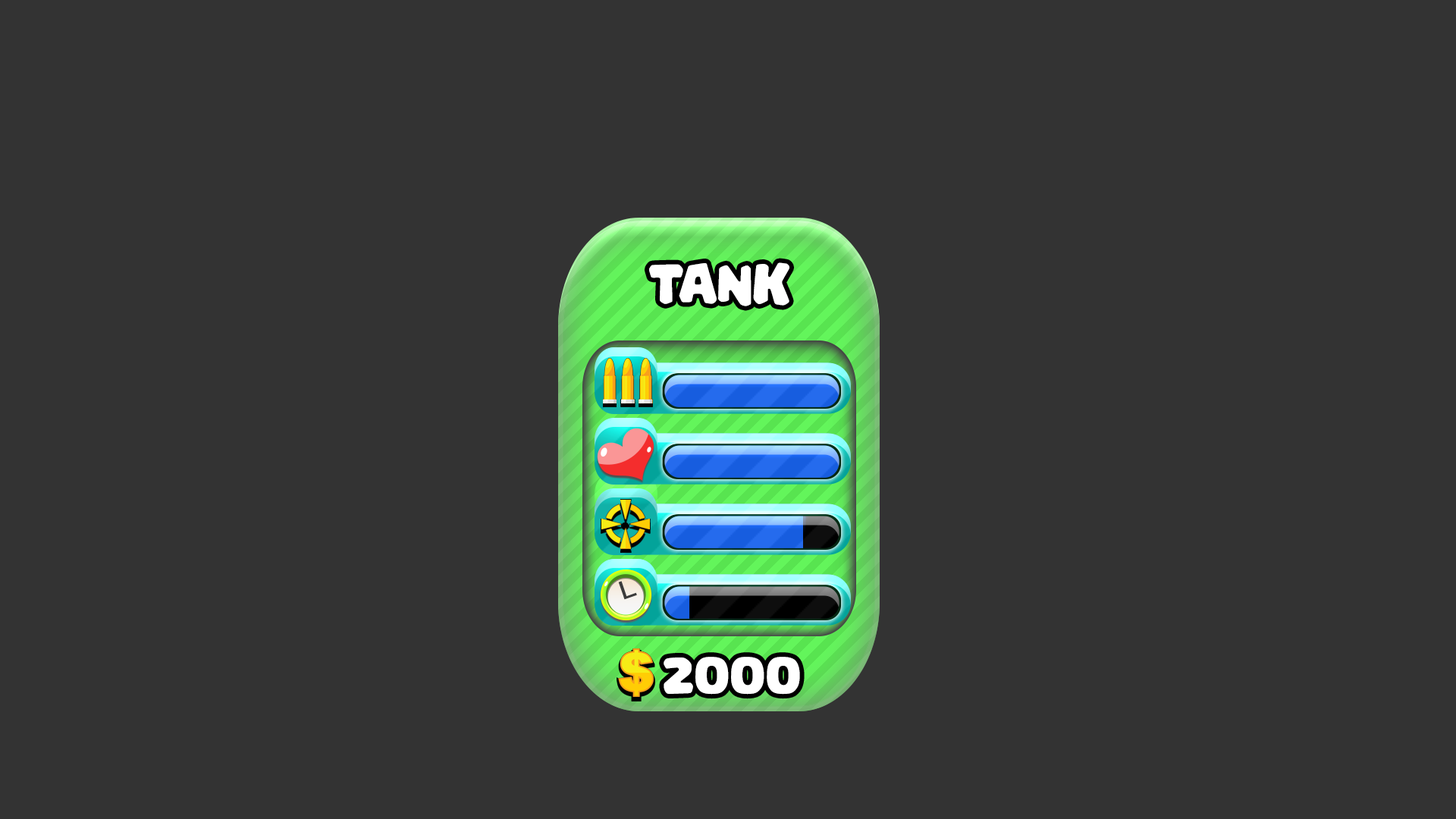
<style>
.page{position:relative;width:1456px;height:819px;background:#333333}
.page>*{position:absolute;margin:0}
.t1{font:61.8px "PalameciaTitling-Regular";letter-spacing:-0.02em;color:#ffffff}
</style>
<div class="page">
<p class="t1" style="left:649px;top:262px;width:140px;height:44px">Tank</p>
<p class="t1" style="left:664px;top:657px;width:136px;height:38px">2000</p>
</div>
